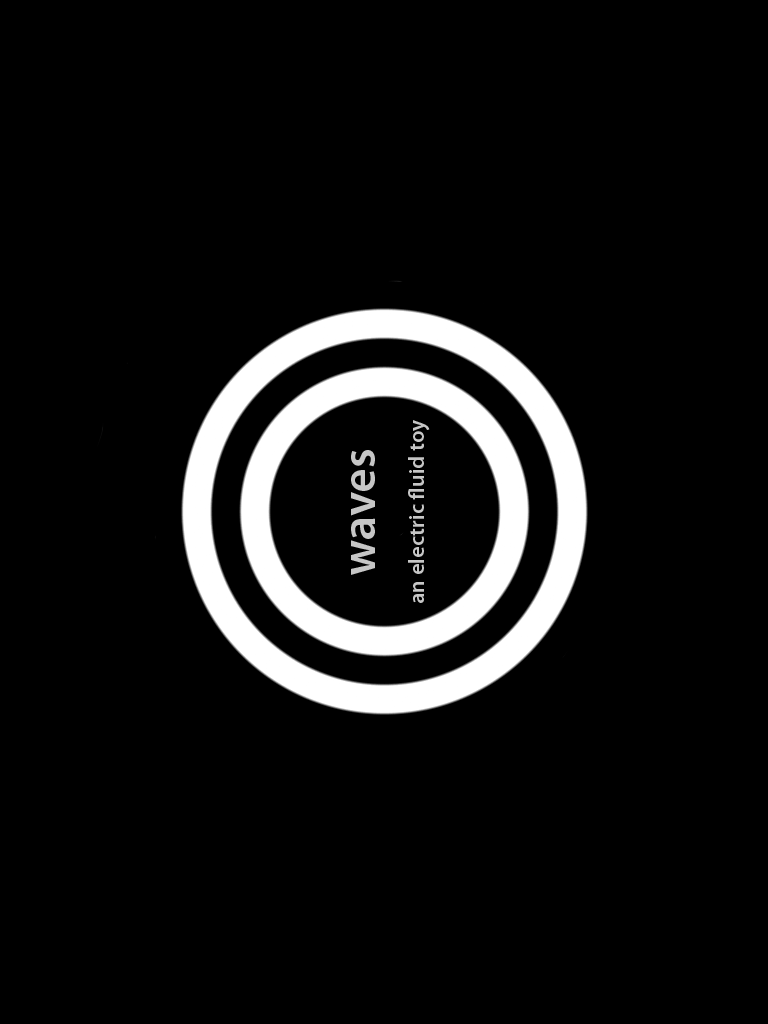
<style>
.page{position:relative;width:768px;height:1024px;background:#000000}
.page>*{position:absolute;margin:0}
.t1{font:22.4px "MyriadPro-Semibold";color:#c6c6c6}
.t2{font:48px "MyriadPro-Semibold";color:#c6c6c6}
</style>
<div class="page">
<p class="t1" style="left:408px;top:420px;width:22px;height:183px;rotate:-90deg">an electric fluid toy</p>
<p class="t2" style="left:351px;top:450px;width:24px;height:125px;rotate:-90deg">waves</p>
</div>
